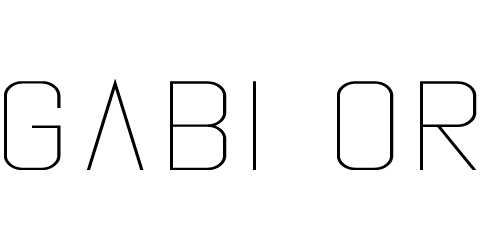
<style>
.page{position:relative;width:500px;height:250px;background:#ffffff}
.page>*{position:absolute;margin:0}
.t1{font:126.8px "Vanadine-Regular";letter-spacing:0.029em;color:#000000;scale:1.27 1}
</style>
<div class="page">
<p class="t1" style="left:4px;top:79px;width:473px;height:91px">Gabi or</p>
</div>
